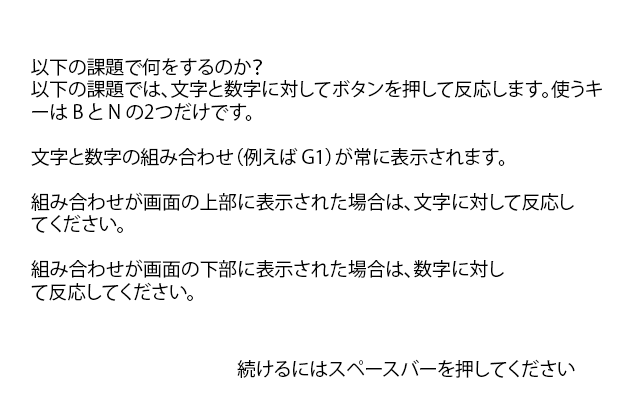
<style>
.page{position:relative;width:619px;height:396px;background:#ffffff}
.page>*{position:absolute;margin:0}
.t1{font:18.8px "KozGoPr6N-Regular";color:#000000}
</style>
<div class="page">
<p class="t1" style="left:31px;top:58px;width:571px;height:243px">以下の課題で何をするのか？<br>以下の課題では、文字と数字に対してボタンを押して反応します。使うキ<br>ーは B と N の2つだけです。<br><br>文字と数字の組み合わせ（例えば G1）が常に表示されます。<br><br>組み合わせが画面の上部に表示された場合は、文字に対して反応し<br>てください。<br><br>組み合わせが画面の下部に表示された場合は、数字に対し<br>て反応してください。</p>
<p class="t1" style="left:237px;top:359px;width:338px;height:19px">続けるにはスペースバーを押してください</p>
</div>
